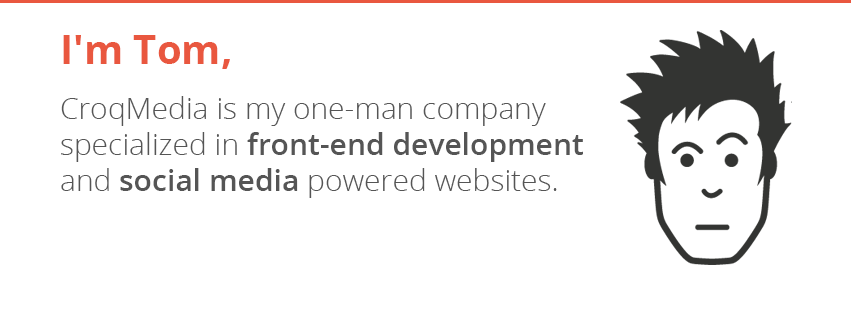
<style>
.page{position:relative;width:851px;height:315px;background:#ffffff}
.page>*{position:absolute;margin:0}
.t1{font:40px "OpenSans-Bold";color:#e9573f}
.t2{font:30px "OpenSans-Light";color:#555555}
.t3{font:30px "OpenSans-Semibold";color:#555555}
</style>
<div class="page">
<p class="t1" style="left:63px;top:35px;width:167px;height:34px">I'm Tom,</p>
<p class="t2" style="left:61px;top:96px;width:522px;height:102px">CroqMedia is my one-man company <br>specialized in <span class="t3">front-end development </span>and <span class="t3">social media </span>powered websites.</p>
</div>
